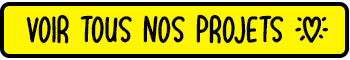
<style>
.page{position:relative;width:350px;height:60px;background:#fff600}
.page>*{position:absolute;margin:0}
.t1{font:30px "LoveheartsXYZ";color:#040404}
</style>
<div class="page">
<p class="t1" style="left:26px;top:14px;width:302px;height:30px">Voir tous nos projets X</p>
</div>
